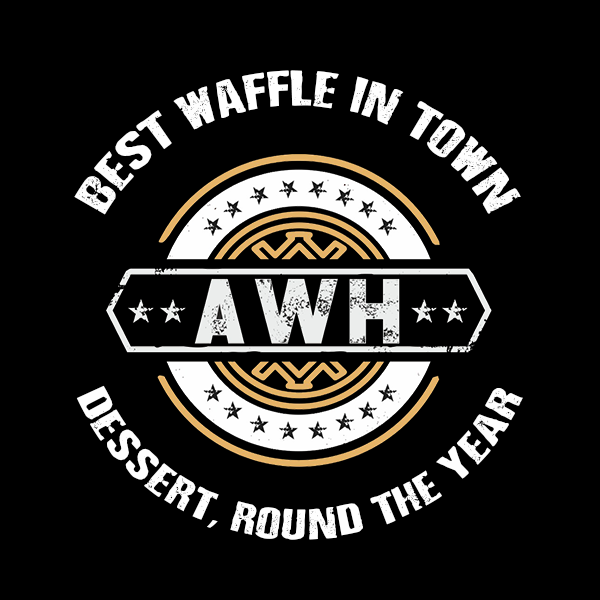
<style>
.page{position:relative;width:600px;height:600px;background:#000000}
.page>*{position:absolute;margin:0}
.t1{font:41.3px/12.1px "Depressionist3Revisited";color:#ffffff;text-transform:uppercase}
.t2{font:35.2px/10.3px "Depressionist3Revisited";color:#ffffff;text-transform:uppercase}
.t3{font:35.2px/10.3px "MyriadPro-Regular";color:#ffffff;text-transform:uppercase}
</style>
<div class="page">
<p class="t1" style="left:74px;top:70px;width:447px;height:145px">best waffle in town</p>
<p class="t2" style="left:76px;top:385px;width:447px;height:155px">Dessert<span class="t3">, </span>Round the year</p>
</div>
